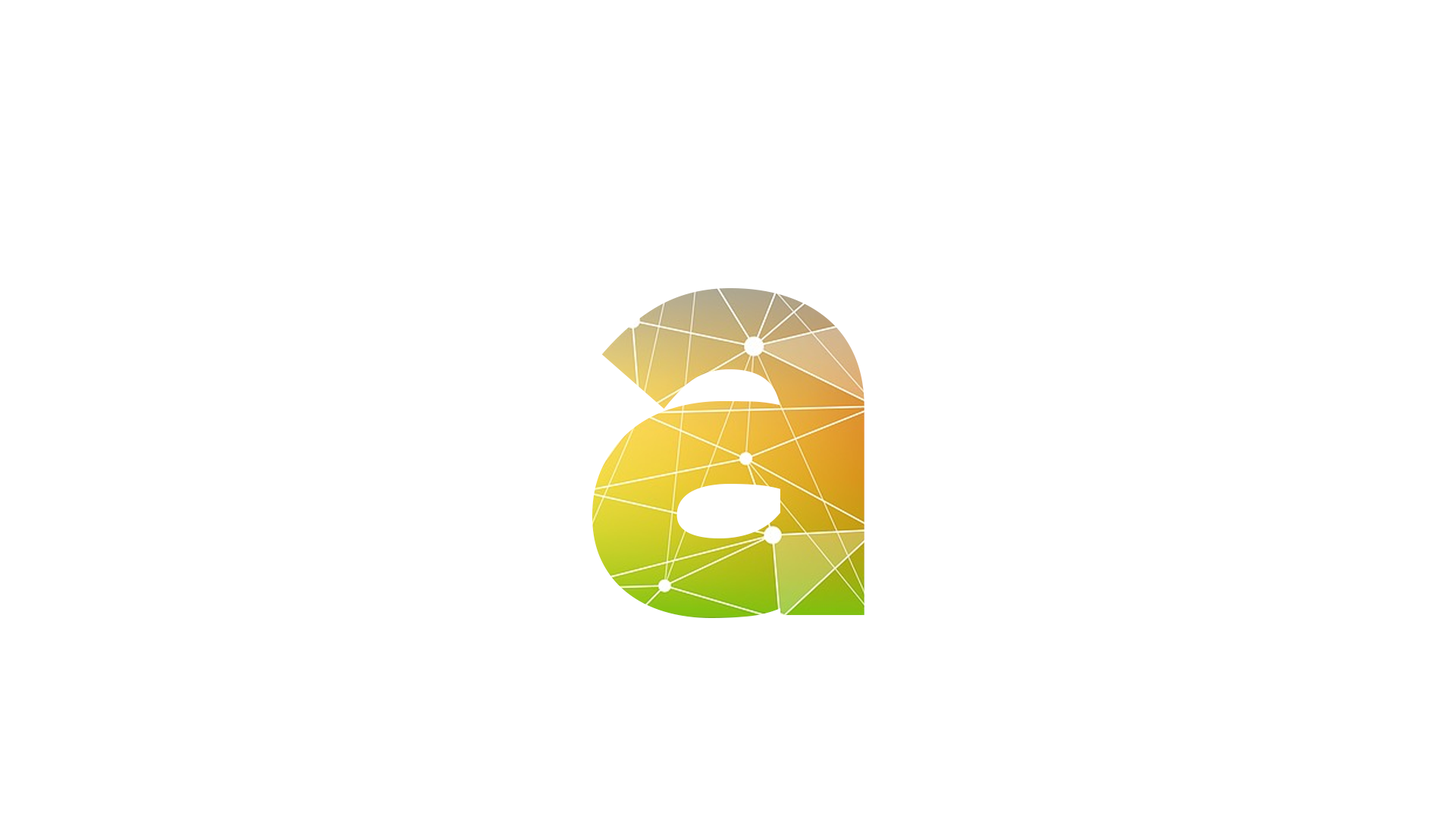
<style>
.page{position:relative;width:1456px;height:819px;background:#ffffff}
.page>*{position:absolute;margin:0}
.t1{font:645.7px "BerlinX-Bold"}
</style>
<div class="page">
<p class="t1" style="left:592px;top:288px;width:272px;height:330px">a</p>
</div>
